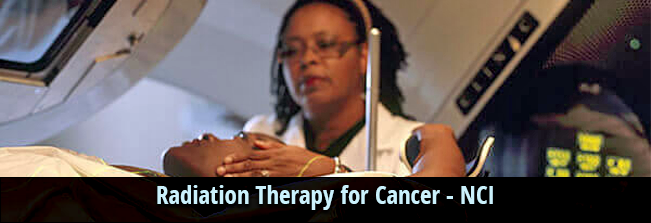
<style>
.page{position:relative;width:651px;height:223px}
.page>*{position:absolute;margin:0}
.t1{font:25px "OpenSans-CondensedBold";color:#cbf1fc}
</style>
<div class="page">
<p class="t1" style="left:157px;top:185px;width:336px;height:25px">Radiation Therapy for Cancer - NCI</p>
</div>
